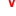
<style>
.page{position:relative;width:16px;height:16px;background:#ffffff}
.page>*{position:absolute;margin:0}
.t1{font:10px "MyriadPro-Bold";color:#fe0006}
</style>
<div class="page">
<p class="t1" style="left:8px;top:0px;width:7px;height:7px">V</p>
</div>
